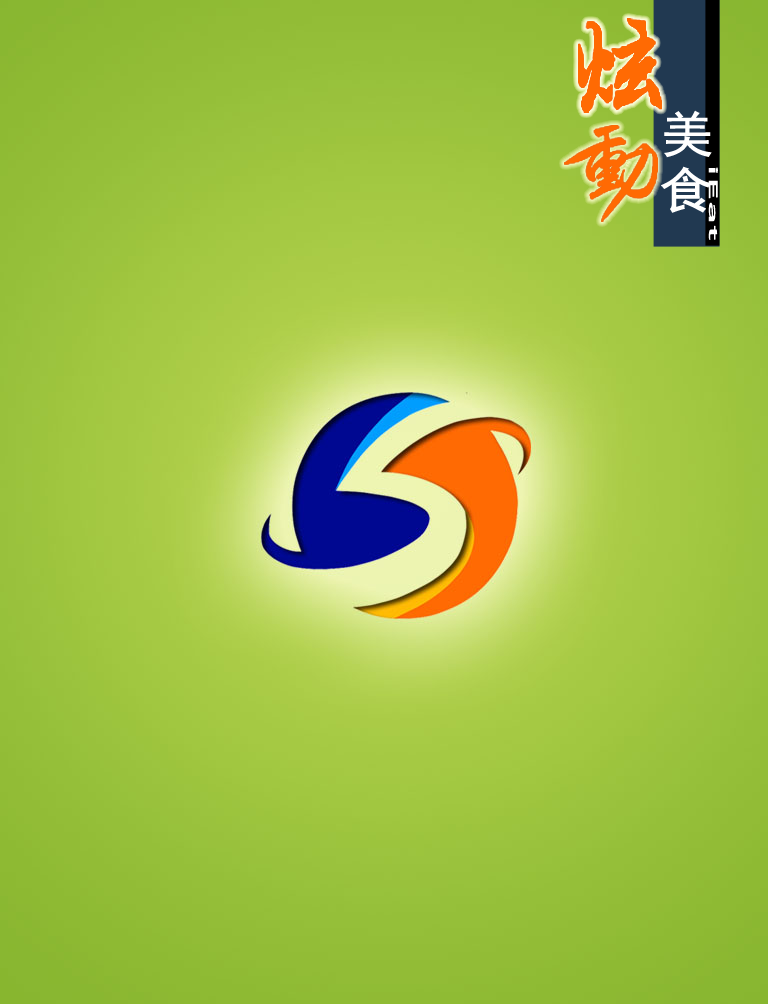
<style>
.page{position:relative;width:768px;height:1004px}
.page>*{position:absolute;margin:0}
.t1{font:49px "SimHei";color:#ffffff;font-weight:bold;scale:1.1 1}
.t2{font:10.6px "MicrosoftYaHei";color:#ffffff;font-weight:bold;scale:3.91 1}
</style>
<div class="page">
<p class="t1" style="left:664px;top:110px;width:48px;height:48px">美</p>
<p class="t1" style="left:661px;top:166px;width:50px;height:47px">食</p>
<p class="t2" style="left:708px;top:167px;width:10px;height:73px;rotate:90deg">iEat</p>
</div>
